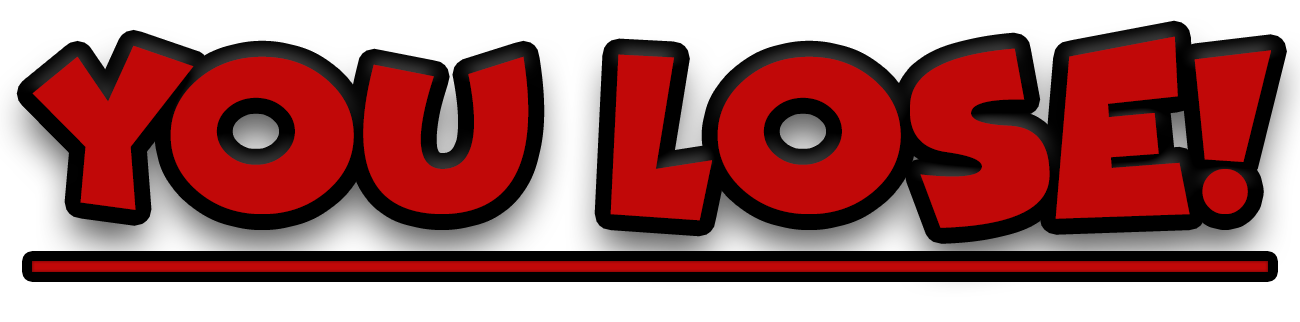
<style>
.page{position:relative;width:1300px;height:322px;background:#c10808}
.page>*{position:absolute;margin:0}
.t1{font:229.8px "Funhouse";color:#c10808}
</style>
<div class="page">
<p class="t1" style="left:32px;top:36px;width:1239px;height:192px">YOU LOSE!</p>
</div>
